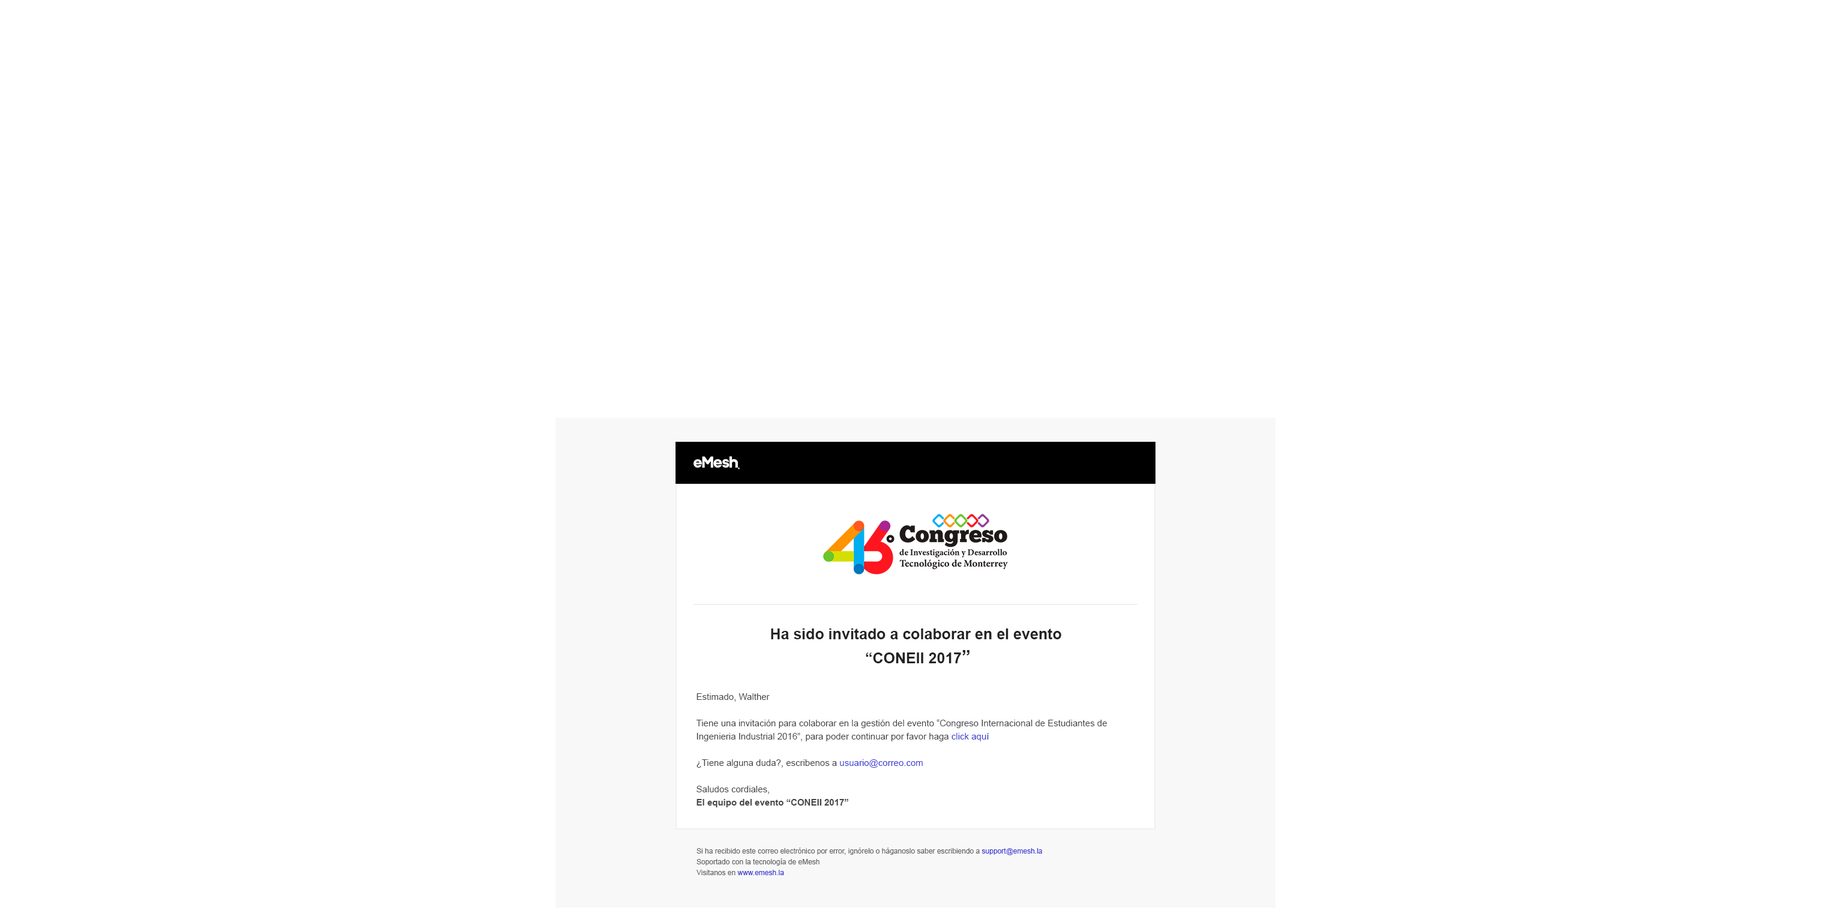
<style>
.page{position:relative;width:1843px;height:922px;background:#ffffff}
.page>*{position:absolute;margin:0}
.t1{font:15px/24px "Arial-BoldMT";color:#232323}
.t2{font:18px/24px "Arial-BoldMT";color:#232323}
.t3{font:9px/13.2px "ArialMT";color:#444444}
.t4{font:9px/13.2px "ArialMT";color:#3838d4}
.t5{font:9px/13.2px "Arial-BoldMT";color:#444444}
.t6{font:7.2px "ArialMT";color:#646464}
.t7{font:7.2px "ArialMT";color:#3838d4}
.t8{font:7.2px/10.8px "ArialMT";color:#646464}
.t9{font:7.2px/10.8px "ArialMT";color:#3838d4}
</style>
<div class="page">
<p class="t1" style="left:771px;top:628px;width:290px;height:35px;text-align:center">Ha sido invitado a colaborar en el evento <br>“CONEII 2017<span class="t2">”</span></p>
<p class="t3" style="left:696px;top:693px;width:411px;height:114px">Estimado, Walther<br><br>Tiene una invitación para colaborar en la gestión del evento “Congreso Internacional de Estudiantes de Ingenieria Industrial 2016”, para poder continuar por favor haga <span class="t4">click aquí<br></span><br>¿Tiene alguna duda?, escribenos a <span class="t4">usuario@correo.com</span><br><br>Saludos cordiales,<br><span class="t5">El equipo del evento “CONEII 2017”</span></p>
<p class="t6" style="left:697px;top:847px;width:345px;height:28px">Si ha recibido este correo electrónico por error, ignórelo o háganoslo saber escribiendo a <span class="t7">support@emesh.la<br></span><span class="t8">Soportado con la tecnología de eMesh  <br>Visitanos en </span><span class="t9">www.emesh.la</span></p>
</div>
